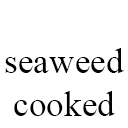
<style>
.page{position:relative;width:128px;height:128px;background:#ffffff}
.page>*{position:absolute;margin:0}
.t1{font:35.4px "TimesNewRomanPSMT";color:#000000}
</style>
<div class="page">
<p class="t1" style="left:5px;top:48px;width:119px;height:68px;text-align:center">seaweed<br>cooked</p>
</div>
